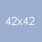
<style>
.page{position:relative;width:42px;height:42px;background:#9eafcd}
.page>*{position:absolute;margin:0}
.t1{font:11px "CenturyGothic";color:#ffffff}
</style>
<div class="page">
<p class="t1" style="left:5px;top:16px;width:30px;height:9px">42x42</p>
</div>
